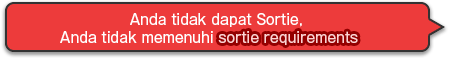
<style>
.page{position:relative;width:450px;height:58px;background:#ed3b3b}
.page>*{position:absolute;margin:0}
.t1{font:14px/18px "GothicMB101Pro-Regular";color:#ffffff}
.t2{font:14px/18px "GothicMB101Pro-Regular";color:#ffd3d3}
</style>
<div class="page">
<p class="t1" style="left:60px;top:13px;width:242px;height:30px;text-align:center">Anda tidak dapat Sortie,<br>Anda tidak memenuhi</p>
<p class="t1" style="left:70px;top:13px;width:291px;height:32px;text-align:center">You cannot sortie,<br>you do not meet the <span class="t2">sortie requirements</span>.</p>
</div>
